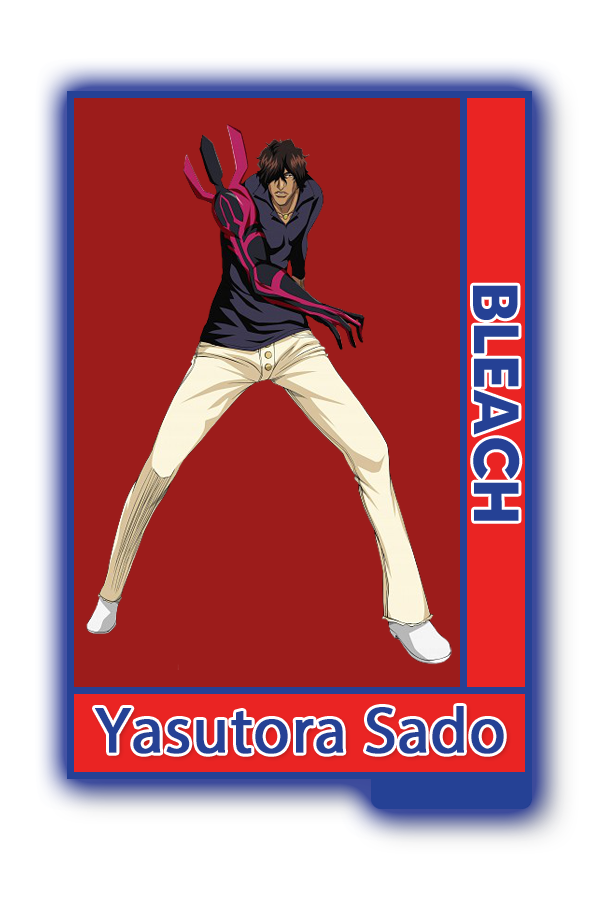
<style>
.page{position:relative;width:600px;height:900px;background:#9c1c1b}
.page>*{position:absolute;margin:0}
.t1{font:63.6px "MADETOMMY-Bold";color:#254195}
.t2{font:65.4px "MyriadPro-Regular";color:#254195;font-weight:bold}
</style>
<div class="page">
<p class="t1" style="left:473px;top:285px;width:47px;height:236px;rotate:90deg">BLEACH</p>
<p class="t2" style="left:95px;top:706px;width:409px;height:48px">Yasutora Sado</p>
</div>
